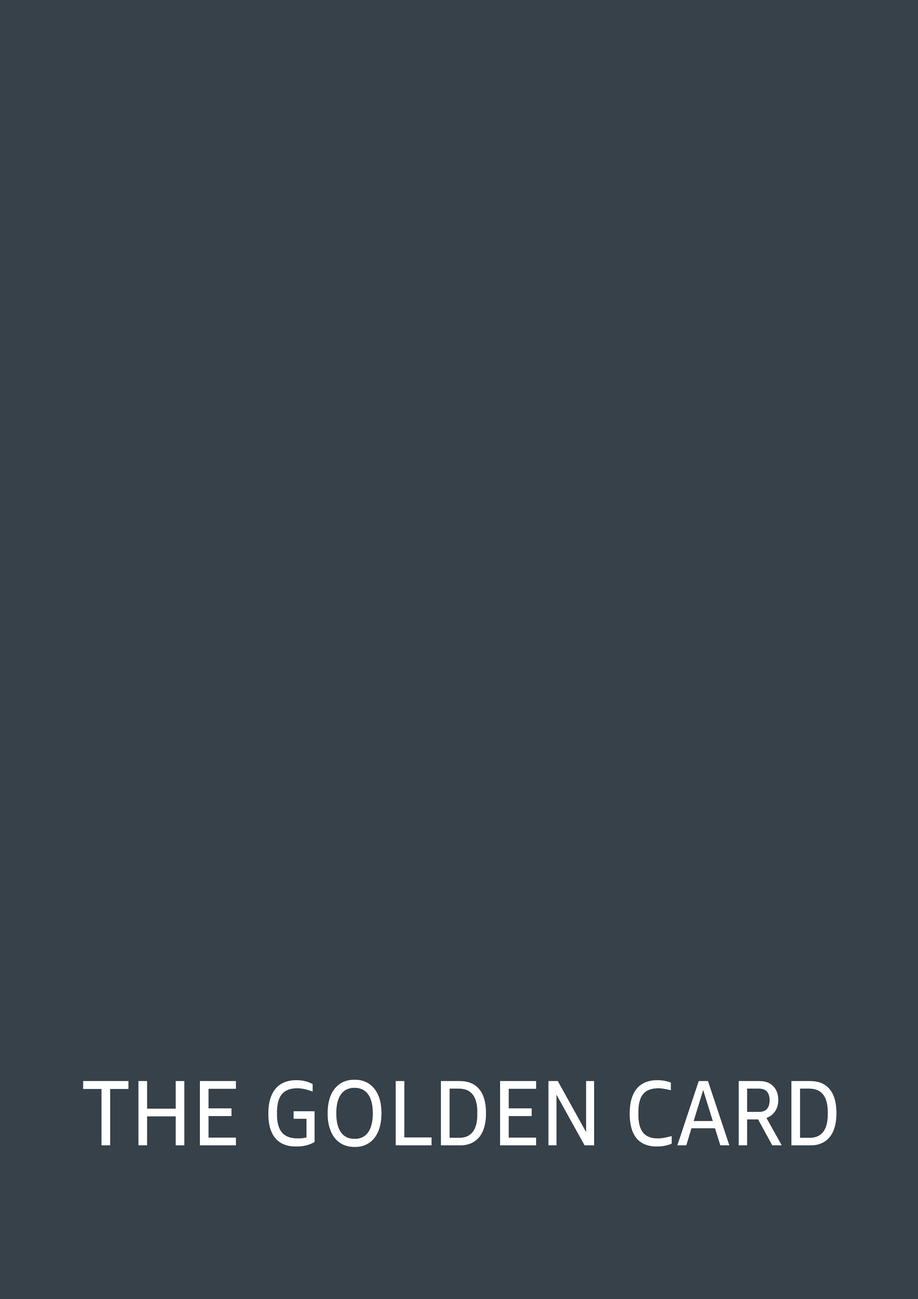
<style>
.page{position:relative;width:918px;height:1299px;background:#36414a}
.page>*{position:absolute;margin:0}
.t1{font:92.6px "AmazonEmber-Regular";color:#ffffff;text-transform:uppercase;scale:0.9 1}
</style>
<div class="page">
<p class="t1" style="left:83px;top:1079px;width:754px;height:68px">THe GOLDEN CARD</p>
</div>
